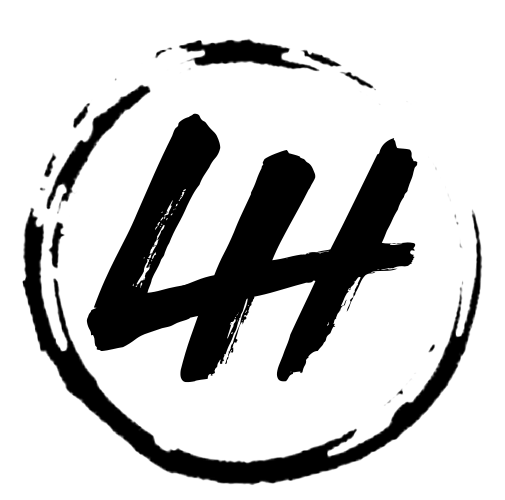
<style>
.page{position:relative;width:505px;height:500px;background:#ffffff}
.page>*{position:absolute;margin:0}
.t1{font:363.9px "ThirdRail";color:#000000}
</style>
<div class="page">
<p class="t1" style="left:86px;top:113px;width:151px;height:238px">l</p>
<p class="t1" style="left:170px;top:138px;width:248px;height:245px">h</p>
</div>
